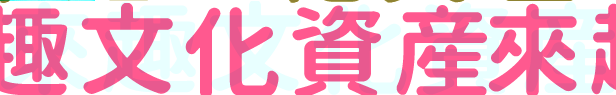
<style>
.page{position:relative;width:616px;height:95px;background:#ffffff}
.page>*{position:absolute;margin:0}
.t1{font:100px "NicoMoji+";letter-spacing:0.05em}
</style>
<div class="page">
<p class="t1" style="left:0px;top:0px;width:615px;height:95px">來趣文化資産</p>
</div>
